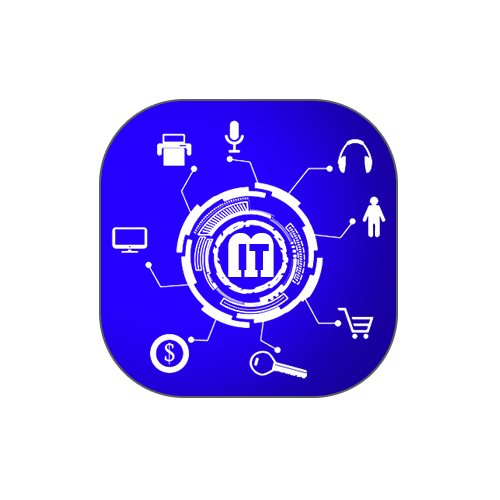
<style>
.page{position:relative;width:500px;height:500px;background:#ffffff}
.page>*{position:absolute;margin:0}
.t1{font:15.3px "Bauhaus93";color:#ffffff}
.t2{font:9.4px "Bauhaus93";color:#2600ff}
</style>
<div class="page">
<p class="t1" style="left:228px;top:233px;width:46px;height:44px">M</p>
<p class="t2" style="left:238px;top:244px;width:31px;height:26px">IT</p>
</div>
